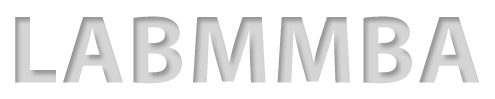
<style>
.page{position:relative;width:495px;height:99px;background:#ffffff}
.page>*{position:absolute;margin:0}
.t1{font:97.2px "MyriadPro-Bold";letter-spacing:0.021em;color:#d1d1d1}
</style>
<div class="page">
<p class="t1" style="left:15px;top:16px;width:465px;height:68px">LABMMBA</p>
</div>
